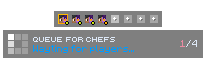
<style>
.page{position:relative;width:206px;height:64px;background:#ffffff}
.page>*{position:absolute;margin:0}
.t1{font:5px "CytooxienExclusive5px";color:#dde8f6}
.t2{font:8px "Minecraftia-Regular";color:#dde8f6}
.t3{font:8px "Minecraftia-Regular";color:#ea8ba2}
.t4{font:8px "Minecraftia-Regular";color:#009cff}
</style>
<div class="page">
<p class="t1" style="left:33px;top:37px;width:82px;height:5px">QUEUE FOR CHEFS</p>
<p class="t2" style="left:180px;top:40px;width:17px;height:7px"><span class="t3">1</span>/4</p>
<p class="t4" style="left:33px;top:45px;width:101px;height:8px">Wayting for players...</p>
</div>
